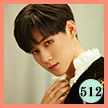
<style>
.page{position:relative;width:108px;height:108px}
.page>*{position:absolute;margin:0}
.t1{font:12px "DFNMing-XB-HK-BF";letter-spacing:0.1em;color:#000000;font-weight:bold}
</style>
<div class="page">
<p class="t1" style="left:80px;top:86px;width:22px;height:11px">512</p>
</div>
